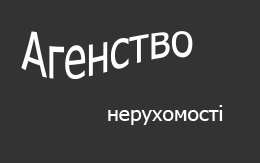
<style>
.page{position:relative;width:260px;height:163px;background:#333333}
.page>*{position:absolute;margin:0}
.t1{font:52.5px "Tahoma";color:#fefefe;scale:0.8 1}
.t2{font:21.2px "Tahoma";color:#fefefe}
</style>
<div class="page">
<p class="t1" style="left:21px;top:31px;width:172px;height:49px">Агенство</p>
<p class="t2" style="left:108px;top:105px;width:115px;height:20px">нерухомості</p>
</div>
